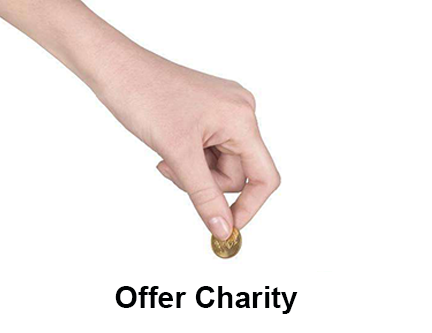
<style>
.page{position:relative;width:432px;height:333px;background:#ffffff}
.page>*{position:absolute;margin:0}
.t1{font:30px "Arial-BoldMT";color:#000203}
</style>
<div class="page">
<p class="t1" style="left:115px;top:286px;width:183px;height:28px">Offer Charity</p>
</div>
